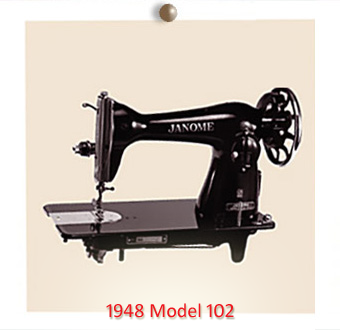
<style>
.page{position:relative;width:340px;height:330px;background:#f2e5d5}
.page>*{position:absolute;margin:0}
.t1{font:20px "Calibri";color:#ef171e}
</style>
<div class="page">
<p class="t1" style="left:106px;top:303px;width:128px;height:15px">1948 Model 102</p>
</div>
